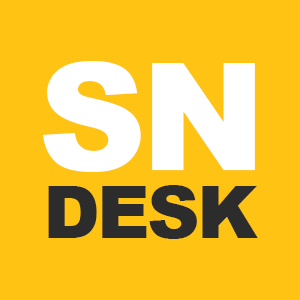
<style>
.page{position:relative;width:300px;height:300px;background:#ffc314}
.page>*{position:absolute;margin:0}
.t1{font:150.1px "Arial-Black";letter-spacing:-0.04em;color:#ffffff}
.t2{font:73px "Arial-Black";letter-spacing:-0.04em;color:#2c2c2c}
</style>
<div class="page">
<p class="t1" style="left:43px;top:61px;width:212px;height:111px">SN</p>
<p class="t2" style="left:48px;top:185px;width:210px;height:54px">DESK</p>
</div>
